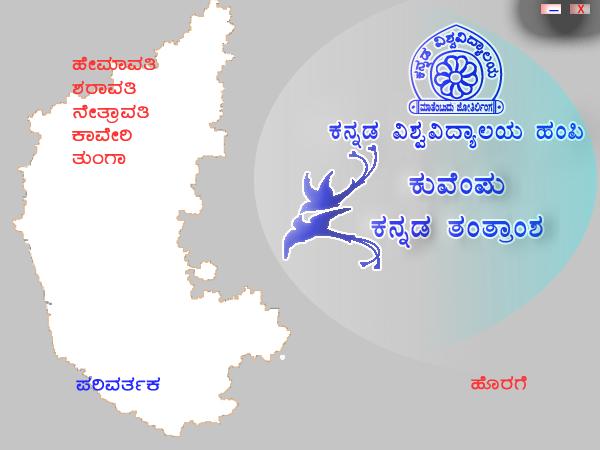
<style>
.page{position:relative;width:600px;height:450px;background:#c5c5c5}
.page>*{position:absolute;margin:0}
.t1{font:13px "Calibri";color:#ff1301}
.t2{font:18px "Calibri";color:#0415f9}
.t3{font:125.6px "AA"}
.t4{font:22px "Kuvempu_Eng_0006";color:#fe3534}
.t5{font:30px "Kuvempu_Eng_0003"}
.t6{font:36px "Kuvempu_Eng_0003";color:#2940ed}
.t7{font:22px "Kuvempu_Eng_0006";color:#2429ff}
</style>
<div class="page">
<p class="t1" style="left:577px;top:4px;width:8px;height:10px">X</p>
<p class="t2" style="left:549px;top:10px;width:10px;height:2px">_</p>
<p class="t3" style="left:408px;top:24px;width:96px;height:90px">A</p>
<p class="t4" style="left:72px;top:56px;width:84px;height:15px">ºÉÃªÀiÁªÀw</p>
<p class="t4" style="left:72px;top:80px;width:64px;height:15px">±ÀgÁªÀw</p>
<p class="t4" style="left:73px;top:104px;width:76px;height:19px">£ÉÃvÁæªÀw</p>
<p class="t5" style="left:329px;top:121px;width:254px;height:28px">PÀ£ÀßqÀ «±Àé«zÁå®AiÀÄ ºÀA¦</p>
<p class="t4" style="left:72px;top:127px;width:60px;height:15px">PÁªÉÃj</p>
<p class="t4" style="left:72px;top:150px;width:54px;height:15px">vÀÄAUÁ</p>
<p class="t6" style="left:371px;top:172px;width:172px;height:76px;text-align:center">PÀÄªÉA¥ÀÄ <br>PÀ£ÀßqÀ vÀAvÁæA±À</p>
<p class="t7" style="left:76px;top:377px;width:84px;height:14px">¥ÀjªÀvÀðPÀ</p>
<p class="t4" style="left:471px;top:376px;width:56px;height:14px">ºÉÆgÀUÉ</p>
</div>
